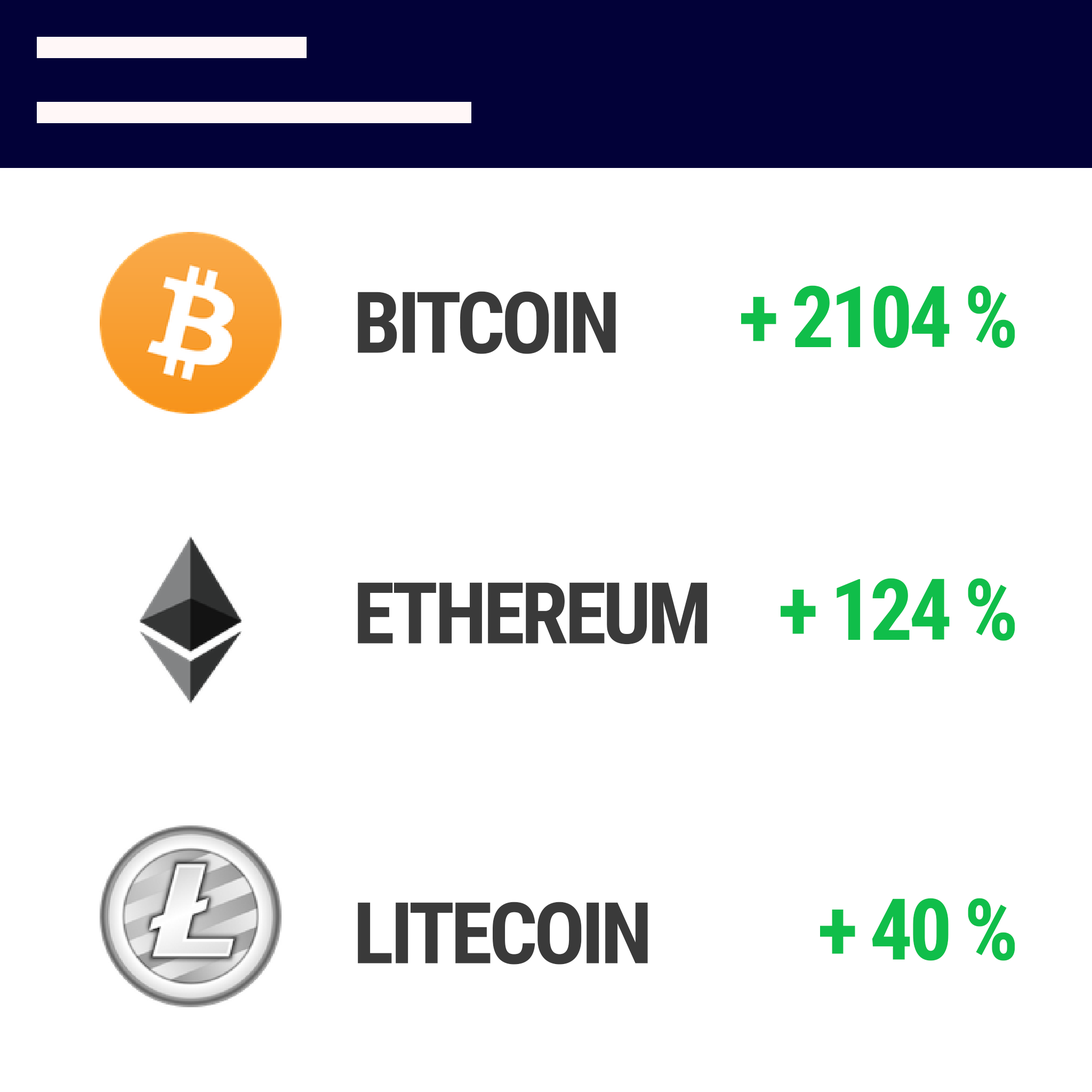
<style>
.page{position:relative;width:1092px;height:1092px;background:#ffffff}
.page>*{position:absolute;margin:0}
.t1{font:85.3px "RobotoCondensed-Bold";letter-spacing:-0.045em;color:#3a3a3a}
.t2{font:85.3px "RobotoCondensed-Bold";letter-spacing:-0.045em;color:#10be4a}
</style>
<div class="page">
<p class="t1" style="left:358px;top:291px;width:258px;height:63px">BITCOIN</p>
<p class="t2" style="left:741px;top:285px;width:274px;height:63px">+ 2104 %</p>
<p class="t2" style="left:781px;top:578px;width:234px;height:63px">+ 124 %</p>
<p class="t1" style="left:358px;top:582px;width:350px;height:63px">ETHEREUM</p>
<p class="t1" style="left:358px;top:902px;width:290px;height:63px">LITECOIN</p>
<p class="t2" style="left:820px;top:898px;width:195px;height:63px">+ 40 %</p>
</div>
